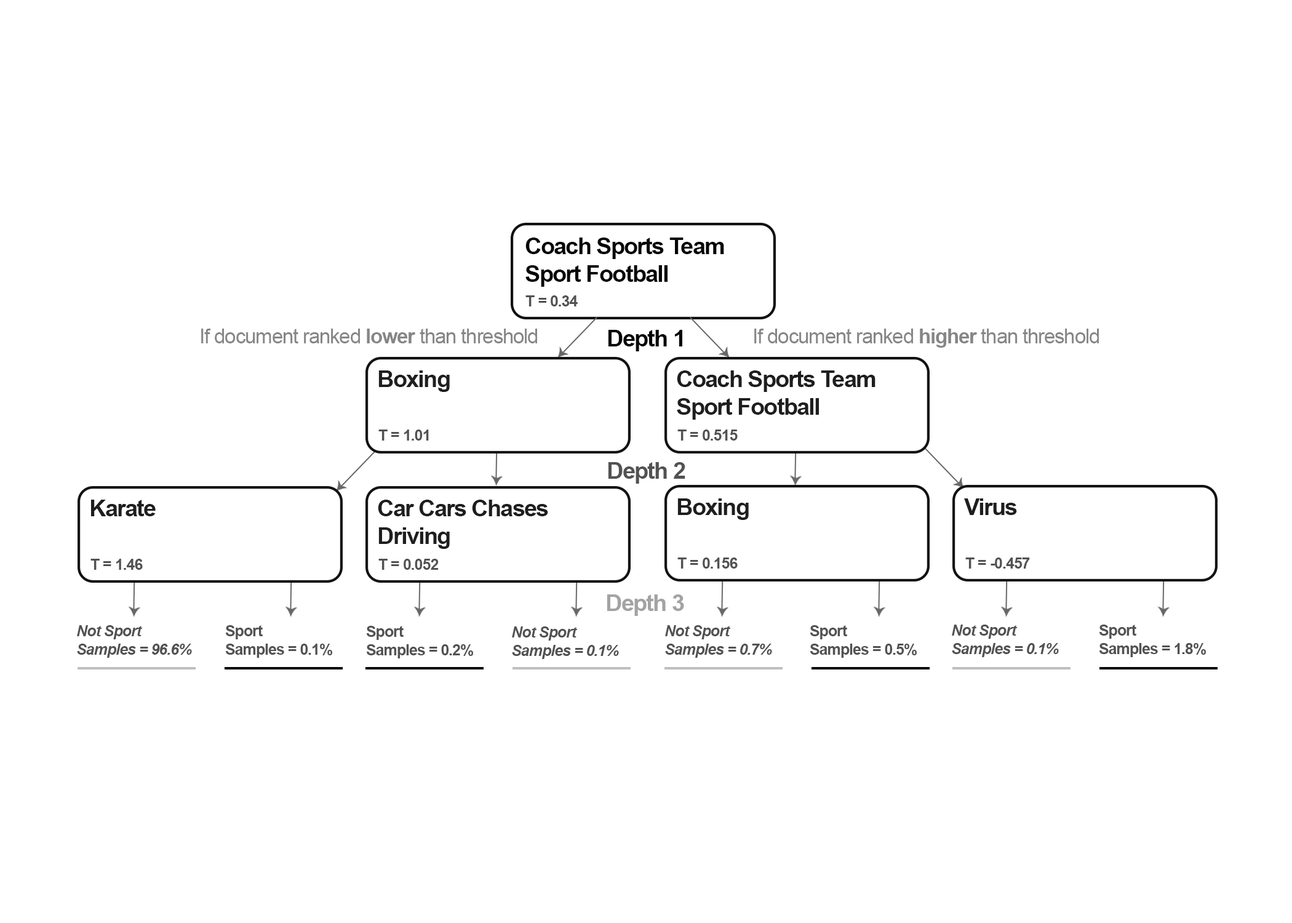
<style>
.page{position:relative;width:1292px;height:923px;background:#ffffff}
.page>*{position:absolute;margin:0}
.t1{font:23.1px "Arial-BoldMT";letter-spacing:-0.04em;color:#070707}
.t2{font:15.4px "Arial-BoldMT";letter-spacing:-0.04em;color:#525252}
.t3{font:20.5px "ArialMT";letter-spacing:-0.04em;color:#868686}
.t4{font:20.5px "Arial-BoldMT";letter-spacing:-0.04em;color:#868686}
.t5{font:23.1px "Arial-BoldMT";letter-spacing:-0.04em;color:#1f1f1f}
.t6{font:23.1px "Arial-BoldMT";letter-spacing:-0.04em;color:#1e1e1e}
.t7{font:23.1px "Arial-BoldMT";letter-spacing:-0.04em;color:#525252}
.t8{font:23.1px "Arial-BoldMT";letter-spacing:-0.04em;color:#a3a3a3}
.t9{font:15.4px "Arial-BoldItalicMT";letter-spacing:-0.04em;color:#525252}
</style>
<div class="page">
<p class="t1" style="left:525px;top:237px;width:199px;height:50px">Coach Sports Team Sport Football</p>
<p class="t2" style="left:525px;top:295px;width:53px;height:11px">T = 0.34</p>
<p class="t3" style="left:201px;top:329px;width:336px;height:14px">If document ranked <span class="t4">lower </span>than threshold</p>
<p class="t1" style="left:608px;top:330px;width:74px;height:21px">Depth 1</p>
<p class="t3" style="left:754px;top:329px;width:345px;height:19px">If document ranked <span class="t4">higher </span>than threshold</p>
<p class="t5" style="left:378px;top:370px;width:72px;height:22px">Boxing</p>
<p class="t6" style="left:677px;top:370px;width:199px;height:50px">Coach Sports Team Sport Football</p>
<p class="t2" style="left:378px;top:429px;width:51px;height:12px">T = 1.01</p>
<p class="t2" style="left:677px;top:429px;width:61px;height:12px">T = 0.515</p>
<p class="t7" style="left:608px;top:462px;width:77px;height:22px">Depth 2</p>
<p class="t6" style="left:91px;top:500px;width:65px;height:16px">Karate</p>
<p class="t6" style="left:378px;top:500px;width:170px;height:49px">Car Cars Chases <br>Driving</p>
<p class="t6" style="left:677px;top:498px;width:72px;height:22px">Boxing</p>
<p class="t6" style="left:964px;top:498px;width:53px;height:17px">Virus</p>
<p class="t2" style="left:677px;top:557px;width:61px;height:12px">T = 0.156</p>
<p class="t2" style="left:965px;top:557px;width:65px;height:12px">T = -0.457</p>
<p class="t2" style="left:90px;top:559px;width:53px;height:11px">T = 1.46</p>
<p class="t2" style="left:378px;top:559px;width:61px;height:11px">T = 0.052</p>
<p class="t8" style="left:607px;top:594px;width:77px;height:22px">Depth 3</p>
<p class="t9" style="left:77px;top:625px;width:115px;height:33px">Not Sport<br>Samples = 96.6%</p>
<p class="t2" style="left:225px;top:625px;width:107px;height:33px">Sport<br>Samples = 0.1%</p>
<p class="t2" style="left:366px;top:626px;width:107px;height:32px">Sport<br>Samples = 0.2%</p>
<p class="t9" style="left:512px;top:626px;width:107px;height:33px">Not Sport<br>Samples = 0.1%</p>
<p class="t9" style="left:665px;top:625px;width:107px;height:33px">Not Sport<br>Samples = 0.7%</p>
<p class="t2" style="left:810px;top:625px;width:107px;height:33px">Sport<br>Samples = 0.5%</p>
<p class="t9" style="left:952px;top:624px;width:107px;height:33px">Not Sport<br>Samples = 0.1%</p>
<p class="t2" style="left:1099px;top:624px;width:107px;height:33px">Sport<br>Samples = 1.8%</p>
</div>
